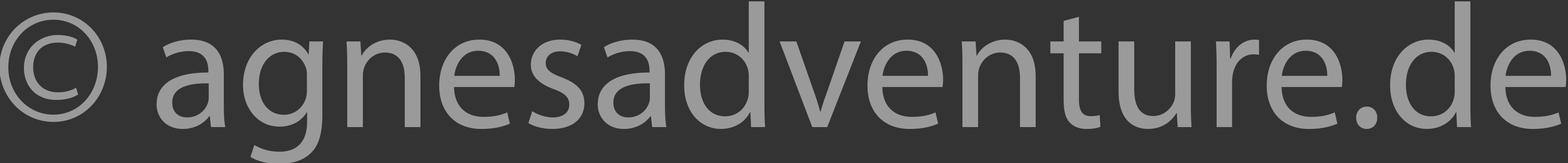
<style>
.page{position:relative;width:1568px;height:163px;background:#333333}
.page>*{position:absolute;margin:0}
.t1{font:177.2px "MyriadPro-Regular";color:#9a9a9a}
</style>
<div class="page">
<p class="t1" style="left:0px;top:1px;width:1566px;height:163px">© agnesadventure.de</p>
</div>
